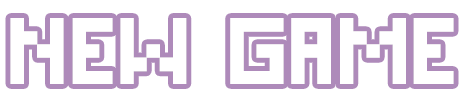
<style>
.page{position:relative;width:464px;height:98px;background:#ffffff}
.page>*{position:absolute;margin:0}
.t1{font:91.4px "DSPixelCyr";letter-spacing:0.025em;color:#ffffff}
</style>
<div class="page">
<p class="t1" style="left:10px;top:18px;width:444px;height:66px">new game</p>
</div>
